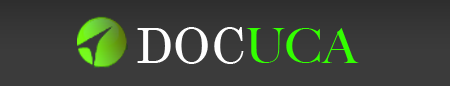
<style>
.page{position:relative;width:450px;height:86px;background:#3b3b3b}
.page>*{position:absolute;margin:0}
.t1{font:48px "CenturySchoolbook";color:#fefefe}
.t2{font:48px "BigCaslon-Medium";color:#33ff00}
</style>
<div class="page">
<p class="t1" style="left:137px;top:27px;width:222px;height:37px">DOC<span class="t2">UCA</span></p>
</div>
